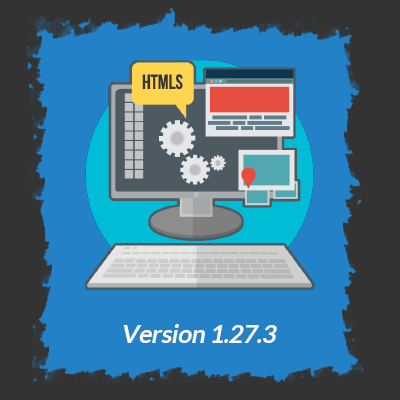
<style>
.page{position:relative;width:400px;height:400px;background:#2281c7}
.page>*{position:absolute;margin:0}
.t1{font:25px "Lato-Bold";letter-spacing:-0.02em;color:#ffffff;font-style:italic}
</style>
<div class="page">
<p class="t1" style="left:123px;top:324px;width:154px;height:19px">Version 1.27.3</p>
</div>
